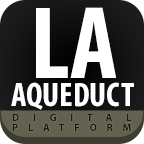
<style>
.page{position:relative;width:144px;height:144px;background:#ffffff}
.page>*{position:absolute;margin:0}
.t1{font:103.8px "MyriadPro-BoldCond";color:#ffffff;text-transform:uppercase}
.t2{font:34px "MyriadPro-BoldCond";color:#ffffff;text-transform:uppercase}
.t3{font:10.5px/10.6px "MyriadPro-Bold";letter-spacing:0.95em;color:#191919;text-transform:uppercase}
.t4{font:10.5px/10.6px "MyriadPro-Bold";letter-spacing:1.33em;color:#191919;text-transform:uppercase}
</style>
<div class="page">
<p class="t1" style="left:36px;top:7px;width:80px;height:71px">LA</p>
<p class="t2" style="left:11px;top:82px;width:123px;height:28px">Aqueduct</p>
<p class="t3" style="left:12px;top:113px;width:119px;height:18px;text-align:center"><span class="t4">Digital<br></span>Platform</p>
</div>
